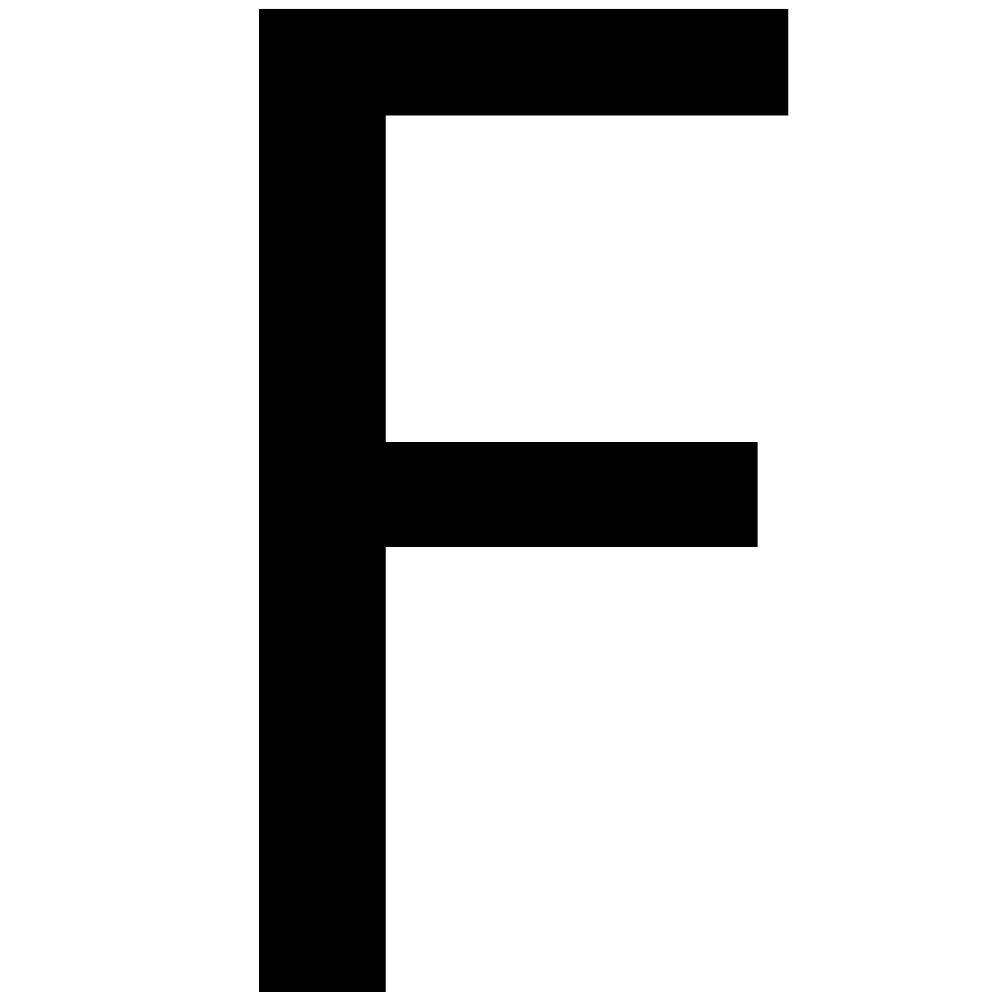
<style>
.page{position:relative;width:1000px;height:1000px;background:#ffffff}
.page>*{position:absolute;margin:0}
.t1{font:1458.3px "MyriadPro-Regular";color:#000000}
</style>
<div class="page">
<p class="t1" style="left:259px;top:8px;width:530px;height:984px">F</p>
</div>
